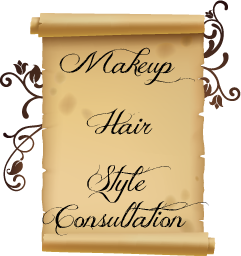
<style>
.page{position:relative;width:241px;height:256px;background:#ffffff}
.page>*{position:absolute;margin:0}
.t1{font:30px "JellykaDeliciousCake";color:#000000}
</style>
<div class="page">
<p class="t1" style="left:59px;top:47px;width:136px;height:38px">Makeup</p>
<p class="t1" style="left:86px;top:108px;width:67px;height:27px">Hair</p>
<p class="t1" style="left:42px;top:164px;width:167px;height:72px;text-align:center">Style <br>Consultation</p>
</div>
